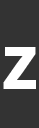
<style>
.page{position:relative;width:39px;height:128px;background:#333333}
.page>*{position:absolute;margin:0}
.t1{font:75px "AdobeGothicStd-Bold";color:#ffffff}
</style>
<div class="page">
<p class="t1" style="left:3px;top:47px;width:33px;height:42px">z</p>
</div>
